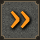
<style>
.page{position:relative;width:40px;height:40px}
.page>*{position:absolute;margin:0}
.t1{font:48px "Candara";color:#ff981f}
</style>
<div class="page">
<p class="t1" style="left:10px;top:11px;width:20px;height:17px">»</p>
</div>
